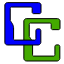
<style>
.page{position:relative;width:64px;height:64px;background:#ffffff}
.page>*{position:absolute;margin:0}
.t1{font:60px "bitwise";color:#0000ff}
.t2{font:60px "bitwise";color:#44aa00}
</style>
<div class="page">
<p class="t1" style="left:3px;top:1px;width:40px;height:45px">C</p>
<p class="t2" style="left:22px;top:17px;width:40px;height:45px">C</p>
</div>
